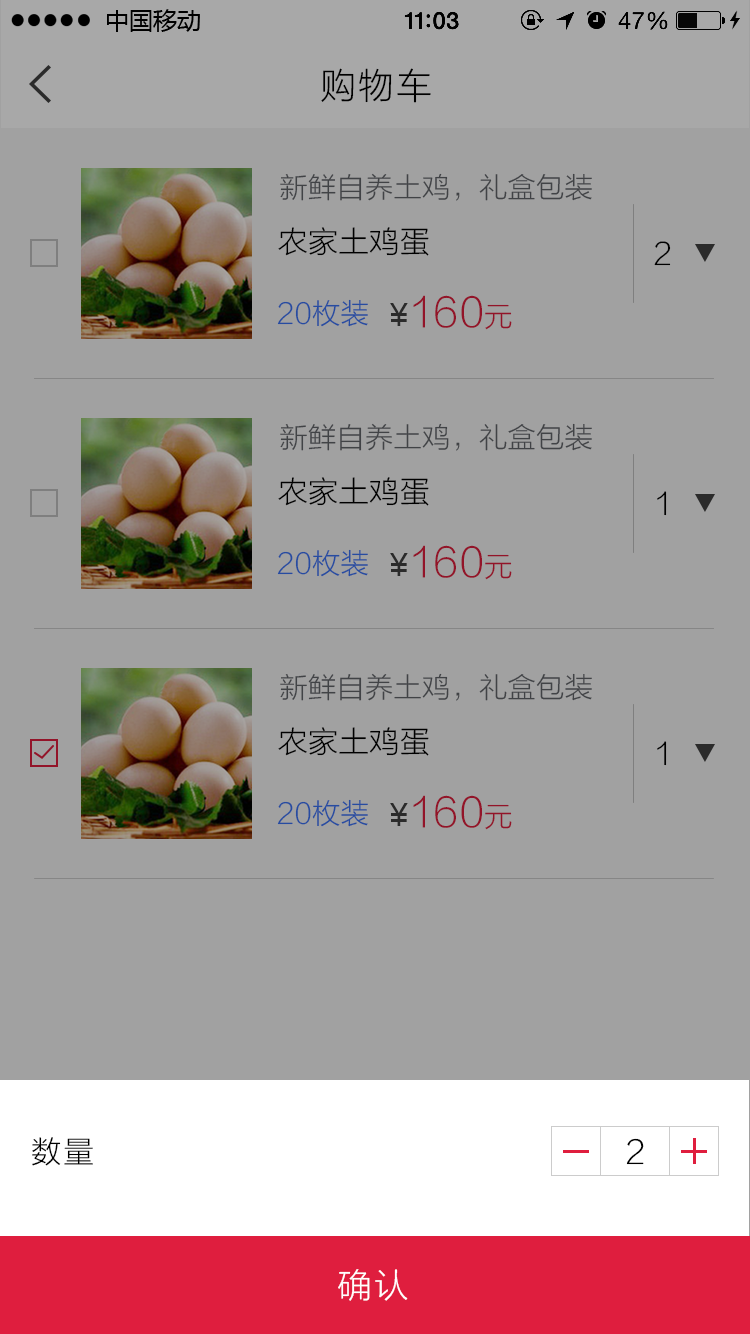
<style>
.page{position:relative;width:750px;height:1334px;background:#a1a1a1}
.page>*{position:absolute;margin:0}
.t1{font:35.7px "STHeitiSC-Light";color:#000000}
.t2{font:28px "STHeitiSC-Light";letter-spacing:-0.06em;color:#414346}
.t3{font:30px "STHeitiSC-Light";letter-spacing:-0.06em;color:#000000}
.t4{font:28px "STHeitiSC-Light";letter-spacing:-0.06em;color:#274ca1}
.t5{font:40px "STHeitiSC-Light";letter-spacing:-0.06em;color:#931429}
.t6{font:32px "DokChampa";color:#931429}
.t7{font:28px "STHeitiSC-Light";letter-spacing:-0.06em;color:#931429}
.t8{font:30px "STHeitiSC-Light";color:#000000}
.t9{font:32px "STHeitiSC-Light";color:#000000}
.t10{font:34px "STHeitiSC-Light";color:#ffffff}
</style>
<div class="page">
<p class="t1" style="left:321px;top:68px;width:110px;height:35px">购物车</p>
<p class="t2" style="left:280px;top:173px;width:312px;height:28px">新鲜自养土鸡，礼盒包装</p>
<p class="t3" style="left:278px;top:227px;width:151px;height:29px">农家土鸡蛋</p>
<p class="t3" style="left:654px;top:241px;width:17px;height:25px">2</p>
<p class="t4" style="left:277px;top:299px;width:91px;height:28px">20枚装</p>
<p class="t5" style="left:390px;top:295px;width:122px;height:35px"><span class="t6">¥</span>160<span class="t7">元</span></p>
<p class="t2" style="left:280px;top:423px;width:312px;height:28px">新鲜自养土鸡，礼盒包装</p>
<p class="t3" style="left:278px;top:477px;width:151px;height:29px">农家土鸡蛋</p>
<p class="t3" style="left:657px;top:491px;width:10px;height:25px">1</p>
<p class="t5" style="left:390px;top:545px;width:122px;height:35px"><span class="t6">¥</span>160<span class="t7">元</span></p>
<p class="t4" style="left:277px;top:549px;width:91px;height:28px">20枚装</p>
<p class="t2" style="left:280px;top:673px;width:312px;height:28px">新鲜自养土鸡，礼盒包装</p>
<p class="t3" style="left:278px;top:727px;width:151px;height:29px">农家土鸡蛋</p>
<p class="t3" style="left:657px;top:741px;width:10px;height:25px">1</p>
<p class="t5" style="left:390px;top:795px;width:122px;height:35px"><span class="t6">¥</span>160<span class="t7">元</span></p>
<p class="t4" style="left:277px;top:799px;width:91px;height:28px">20枚装</p>
<p class="t8" style="left:32px;top:1137px;width:61px;height:29px">数量</p>
<p class="t9" style="left:626px;top:1138px;width:18px;height:27px">2</p>
<p class="t10" style="left:338px;top:1269px;width:70px;height:32px">确认</p>
</div>
